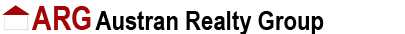
<style>
.page{position:relative;width:405px;height:34px;background:#ffffff}
.page>*{position:absolute;margin:0}
.t1{font:33px "ArialNarrow-Bold";color:#a40404}
.t2{font:27px "ArialNarrow-Bold";color:#000000}
</style>
<div class="page">
<p class="t1" style="left:32px;top:6px;width:59px;height:24px">ARG</p>
<p class="t2" style="left:95px;top:11px;width:229px;height:24px">Austran Realty Group</p>
</div>
